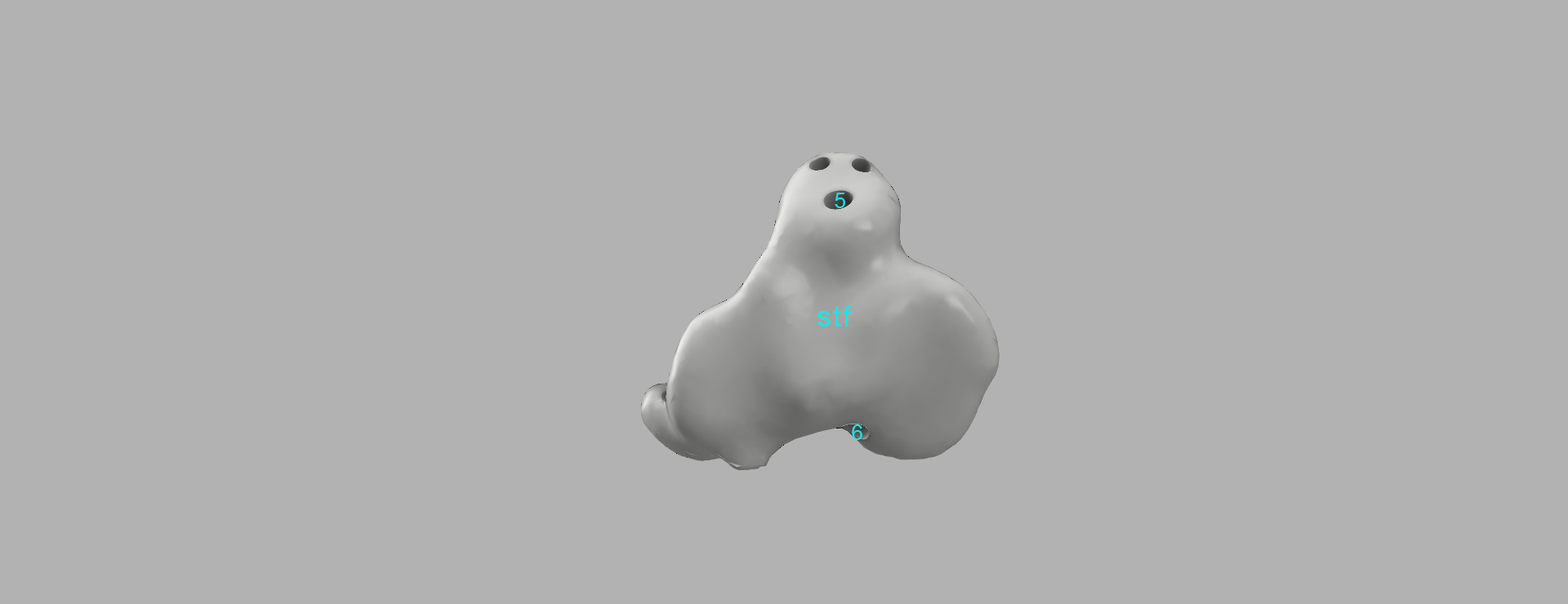
<style>
.page{position:relative;width:1568px;height:604px;background:#b2b2b2}
.page>*{position:absolute;margin:0}
.t1{font:21.2px "ArialMT";letter-spacing:0.06em;color:#1ce3e5}
.t2{font:29.4px "ArialMT";letter-spacing:0.06em;color:#1ce3e5}
</style>
<div class="page">
<p class="t1" style="left:835px;top:193px;width:10px;height:15px">5</p>
<p class="t2" style="left:817px;top:305px;width:36px;height:22px">stf</p>
<p class="t1" style="left:852px;top:425px;width:10px;height:15px">6</p>
</div>
